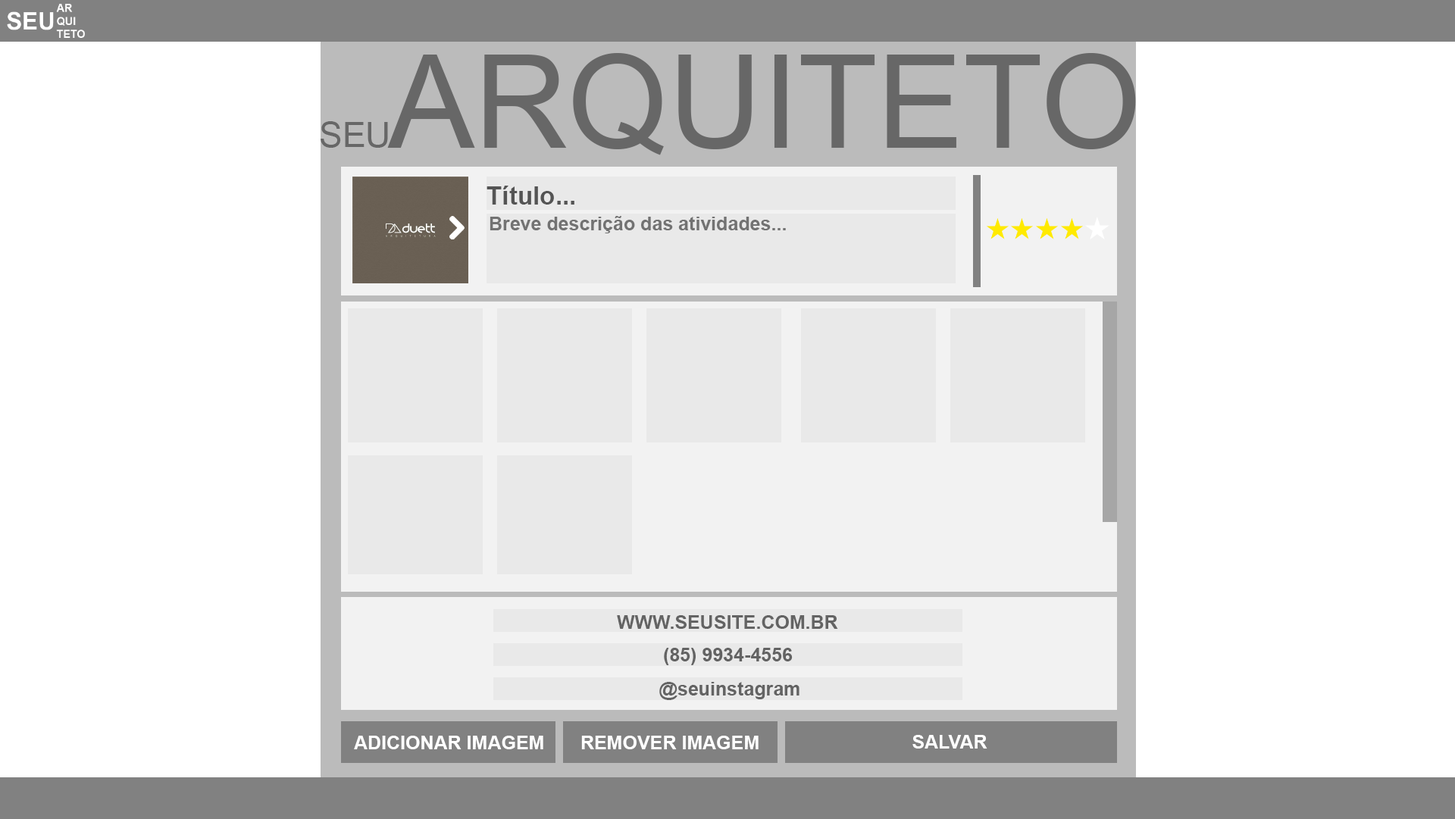
<style>
.page{position:relative;width:1455px;height:819px;background:#ffffff}
.page>*{position:absolute;margin:0}
.t1{font:25.3px "Arial-BoldMT";color:#545454}
.t2{font:18.9px "Arial-BoldMT";color:#727272}
.t3{font:18.9px "Arial-BoldMT";color:#636363}
.t4{font:18.9px "Arial-BoldMT";color:#ffffff}
</style>
<div class="page">
<p class="t1" style="left:487px;top:186px;width:88px;height:19px">Título...</p>
<p class="t2" style="left:490px;top:216px;width:296px;height:17px">Breve descrição das atividades...</p>
<p class="t3" style="left:617px;top:615px;width:221px;height:14px">WWW.SEUSITE.COM.BR</p>
<p class="t3" style="left:664px;top:648px;width:129px;height:17px">(85) 9934-4556</p>
<p class="t3" style="left:659px;top:682px;width:141px;height:18px">@seuinstagram</p>
<p class="t4" style="left:354px;top:736px;width:189px;height:14px">ADICIONAR IMAGEM</p>
<p class="t4" style="left:581px;top:736px;width:178px;height:14px">REMOVER IMAGEM</p>
<p class="t4" style="left:913px;top:735px;width:75px;height:14px">SALVAR</p>
</div>
